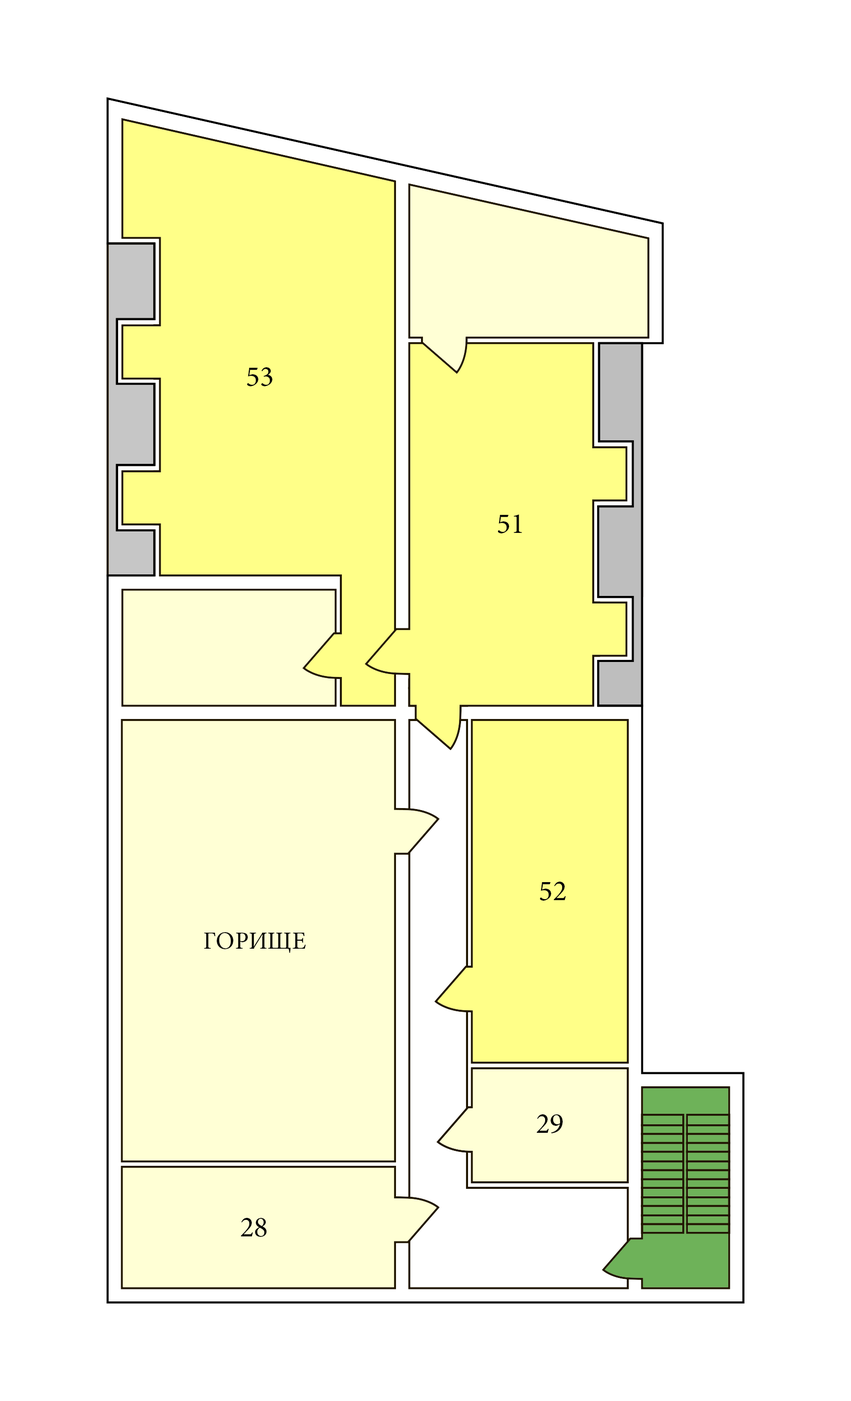
<style>
.page{position:relative;width:851px;height:1401px;background:#ffffff}
.page>*{position:absolute;margin:0}
.t1{font:29.2px "MinionPro-Regular";color:#000000}
.t2{font:25px "MinionPro-Regular";color:#000000}
</style>
<div class="page">
<p class="t1" style="left:247px;top:367px;width:25px;height:19px">53</p>
<p class="t1" style="left:498px;top:515px;width:24px;height:19px">51</p>
<p class="t1" style="left:540px;top:882px;width:26px;height:19px">52</p>
<p class="t2" style="left:204px;top:932px;width:102px;height:21px">ГОРИЩЕ</p>
<p class="t1" style="left:537px;top:1115px;width:26px;height:19px">29</p>
<p class="t1" style="left:241px;top:1218px;width:26px;height:19px">28</p>
</div>
